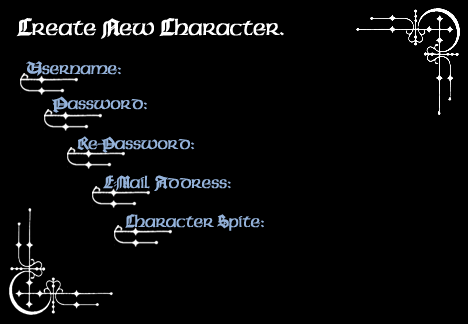
<style>
.page{position:relative;width:468px;height:324px;background:#000000}
.page>*{position:absolute;margin:0}
.t1{font:24px "Celtic-CondensedNormal";color:#ffffff}
.t2{font:24px "CathedralExtendedNormal";color:#ffffff}
.t3{font:18px "Celtic-CondensedNormal";color:#94b2da}
.t4{font:18px "CathedralExtendedNormal";color:#94b2da}
.t5{font:18px "CathedralNormal";color:#94b2da}
</style>
<div class="page">
<p class="t1" style="left:16px;top:18px;width:268px;height:21px"><span class="t2">C</span>reate<span class="t2"> N</span>ew<span class="t2"> C</span>haracter.</p>
<p class="t3" style="left:26px;top:61px;width:95px;height:15px"><span class="t4">U</span>sername:</p>
<p class="t3" style="left:51px;top:96px;width:96px;height:17px"><span class="t4">P</span>assword:</p>
<p class="t3" style="left:77px;top:136px;width:118px;height:17px"><span class="t5">R</span>e-<span class="t5">P</span>assword:</p>
<p class="t3" style="left:103px;top:175px;width:128px;height:16px"><span class="t5">E-M</span>ail <span class="t5">A</span>ddress:</p>
<p class="t3" style="left:125px;top:214px;width:139px;height:17px"><span class="t5">C</span>haracter<span class="t5"> S</span>pite:</p>
</div>
